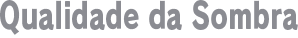
<style>
.page{position:relative;width:298px;height:38px;background:#ffffff}
.page>*{position:absolute;margin:0}
.t1{font:36px "RodinPro-EB";color:#8b8c92;scale:0.73 1}
</style>
<div class="page">
<p class="t1" style="left:0px;top:0px;width:298px;height:35px">Qualidade da Sombra</p>
</div>
